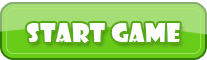
<style>
.page{position:relative;width:207px;height:60px;background:#a5de76}
.page>*{position:absolute;margin:0}
.t1{font:25px "ShowcardGothic-Reg";letter-spacing:0.025em;color:#ffffff}
</style>
<div class="page">
<p class="t1" style="left:26px;top:23px;width:154px;height:20px">Start GAME</p>
</div>
